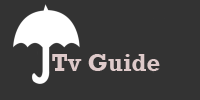
<style>
.page{position:relative;width:200px;height:100px;background:#333333}
.page>*{position:absolute;margin:0}
.t1{font:24px "Rockwell-Bold";color:#decaca}
</style>
<div class="page">
<p class="t1" style="left:52px;top:54px;width:108px;height:17px">Tv Guide</p>
</div>
